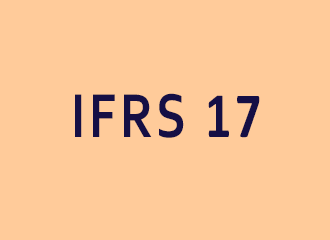
<style>
.page{position:relative;width:330px;height:240px;background:#ffcb9a}
.page>*{position:absolute;margin:0}
.t1{font:65px "Corbel-Bold";letter-spacing:0.075em;color:#150f45;scale:0.8 1}
.t2{font:65px "Calibri-Bold";letter-spacing:0.075em;color:#150f45;scale:0.8 1}
</style>
<div class="page">
<p class="t1" style="left:75px;top:93px;width:185px;height:45px">IFRS <span class="t2">17</span></p>
</div>
